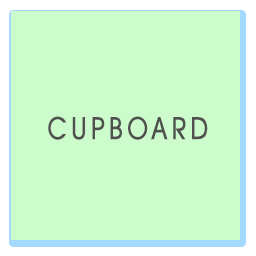
<style>
.page{position:relative;width:256px;height:256px;background:#ccfccb}
.page>*{position:absolute;margin:0}
.t1{font:30px "AvantGarde-Medium";letter-spacing:0.15em;color:#50514f;text-transform:uppercase;scale:0.84 1}
</style>
<div class="page">
<p class="t1" style="left:48px;top:116px;width:160px;height:24px">CUPBOARD</p>
</div>
